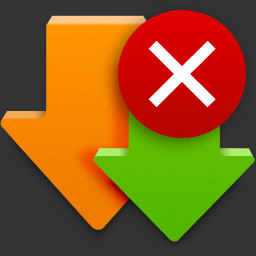
<style>
.page{position:relative;width:256px;height:256px;background:#333333}
.page>*{position:absolute;margin:0}
.t1{font:140px "Menlo-Regular";color:#ffffff}
</style>
<div class="page">
<p class="t1" style="left:148px;top:41px;width:68px;height:66px">✕</p>
</div>
